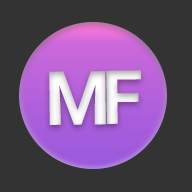
<style>
.page{position:relative;width:192px;height:192px;background:#333333}
.page>*{position:absolute;margin:0}
.t1{font:75px "Roboto-Bold";color:#ffffff}
.t2{font:75px "Roboto-Bold";color:#e9e9e9}
</style>
<div class="page">
<p class="t1" style="left:49px;top:71px;width:57px;height:54px;rotate:-1deg">M</p>
<p class="t2" style="left:106px;top:70px;width:35px;height:54px;rotate:-1deg">F</p>
</div>
